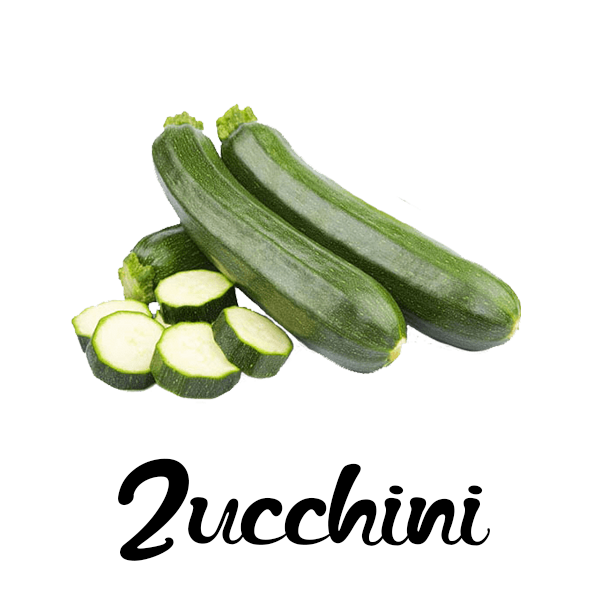
<style>
.page{position:relative;width:600px;height:600px;background:#ffffff}
.page>*{position:absolute;margin:0}
.t1{font:152.8px "TheFoxTail-Regular";color:#000000}
</style>
<div class="page">
<p class="t1" style="left:118px;top:458px;width:372px;height:103px">Zucchini</p>
</div>
